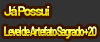
<style>
.page{position:relative;width:100px;height:42px;background:#333333}
.page>*{position:absolute;margin:0}
.t1{font:13.3px "Barlow-Bold";letter-spacing:-0.1em}
.t2{font:13.3px "Barlow-Bold";letter-spacing:-0.13em;scale:0.72 1}
</style>
<div class="page">
<p class="t1" style="left:4px;top:6px;width:46px;height:10px">Já Possui</p>
<p class="t2" style="left:4px;top:26px;width:93px;height:13px">Level de Artefato Sagrado +20</p>
</div>
